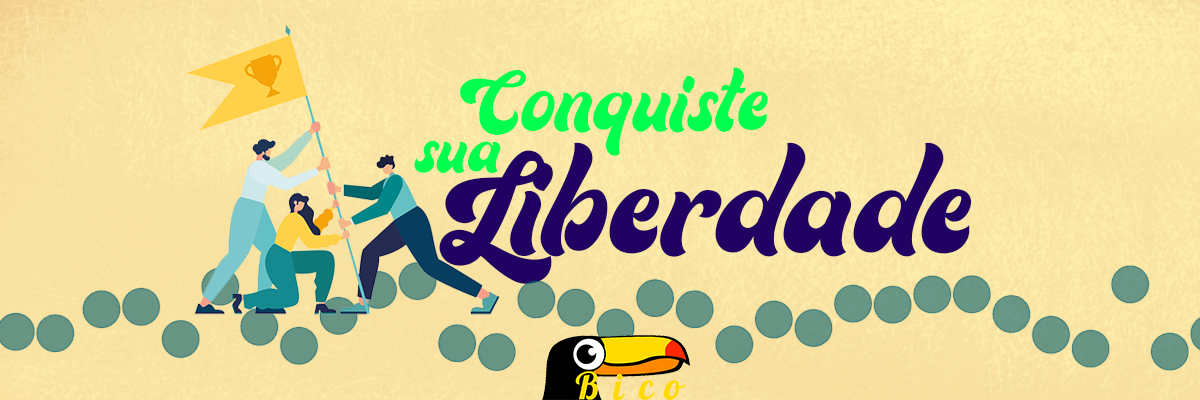
<style>
.page{position:relative;width:1200px;height:400px}
.page>*{position:absolute;margin:0}
.t1{font:90px "RouthersDEMO";color:#00ff4e}
.t2{font:72px "RouthersDEMO";color:#00ff4e}
.t3{font:150px "RouthersDEMO";color:#210162}
.t4{font:150px "Onyx";color:#210162}
</style>
<div class="page">
<p class="t1" style="left:460px;top:67px;width:308px;height:89px">Conquiste</p>
<p class="t2" style="left:414px;top:140px;width:87px;height:33px">sua</p>
<p class="t3" style="left:439px;top:142px;width:533px;height:142px"><span class="t4"><br></span>Liberdade</p>
</div>
